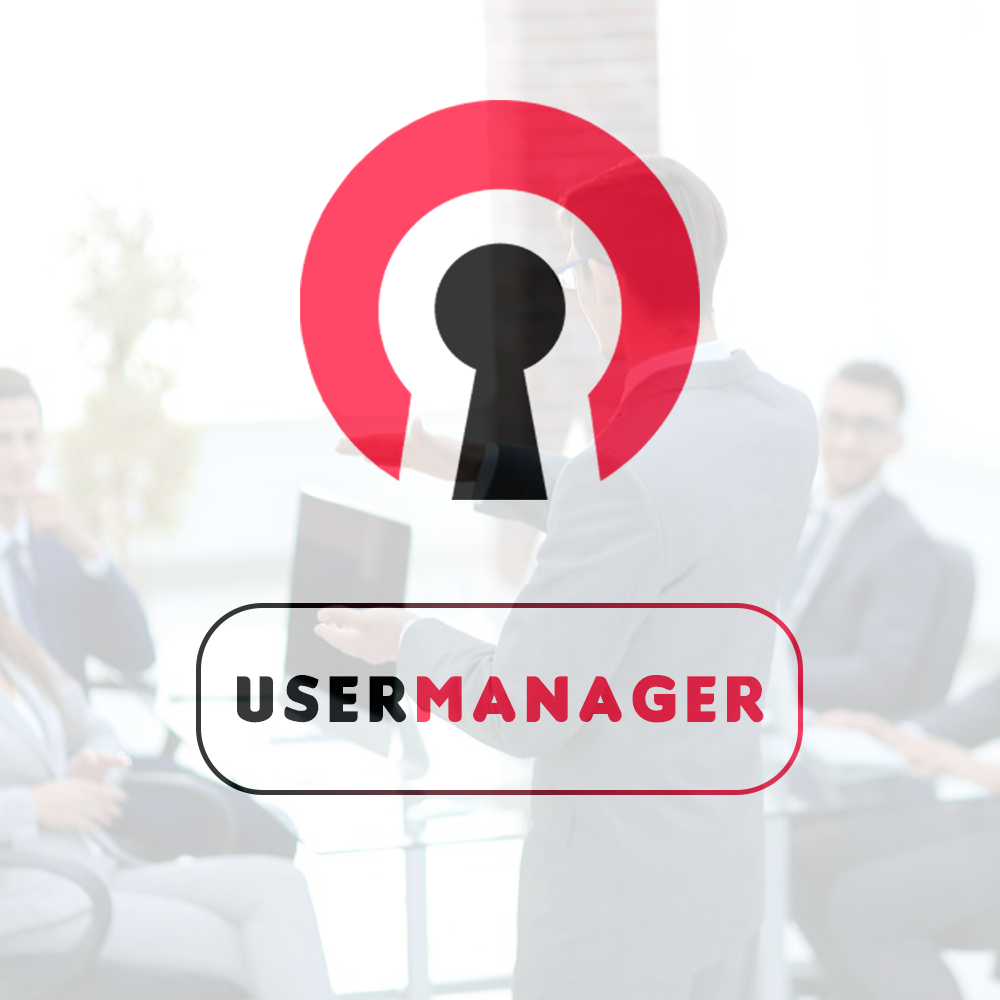
<style>
.page{position:relative;width:1000px;height:1000px;background:#ffffff}
.page>*{position:absolute;margin:0}
.t1{font:69.4px "Insaniburger-with-Cheese";letter-spacing:0.12em}
</style>
<div class="page">
<p class="t1" style="left:237px;top:675px;width:527px;height:48px">USERMANAGER</p>
</div>
